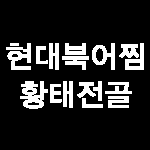
<style>
.page{position:relative;width:150px;height:150px;background:#000000}
.page>*{position:absolute;margin:0}
.t1{font:30px/38px "YDIYGO330";letter-spacing:-0.02em;color:#ffffff;font-weight:bold}
</style>
<div class="page">
<p class="t1" style="left:6px;top:43px;width:138px;height:66px;text-align:center">현대북어찜<br>황태전골</p>
</div>
